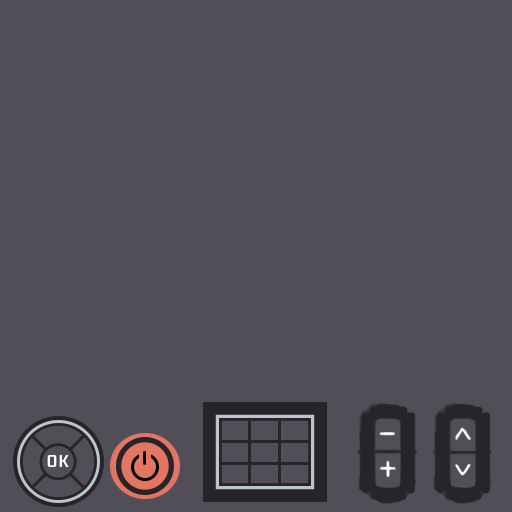
<style>
.page{position:relative;width:512px;height:512px;background:#524e57}
.page>*{position:absolute;margin:0}
.t1{font:15.1px "Giants-Regular";letter-spacing:0.05em;color:#ffffff}
</style>
<div class="page">
<p class="t1" style="left:47px;top:455px;width:22px;height:12px">OK</p>
</div>
